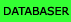
<style>
.page{position:relative;width:71px;height:22px;background:#33ff33}
.page>*{position:absolute;margin:0}
.t1{font:11px "Verdana";color:#000000}
</style>
<div class="page">
<p class="t1" style="left:4px;top:6px;width:66px;height:10px">DATABASER</p>
</div>
